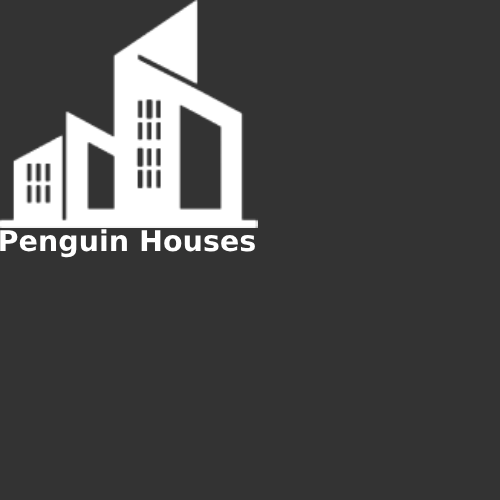
<style>
.page{position:relative;width:500px;height:500px;background:#333333}
.page>*{position:absolute;margin:0}
.t1{font:28.6px "DejaVuSans-Bold";color:#ffffff}
</style>
<div class="page">
<p class="t1" style="left:0px;top:229px;width:255px;height:29px">Penguin Houses</p>
</div>
